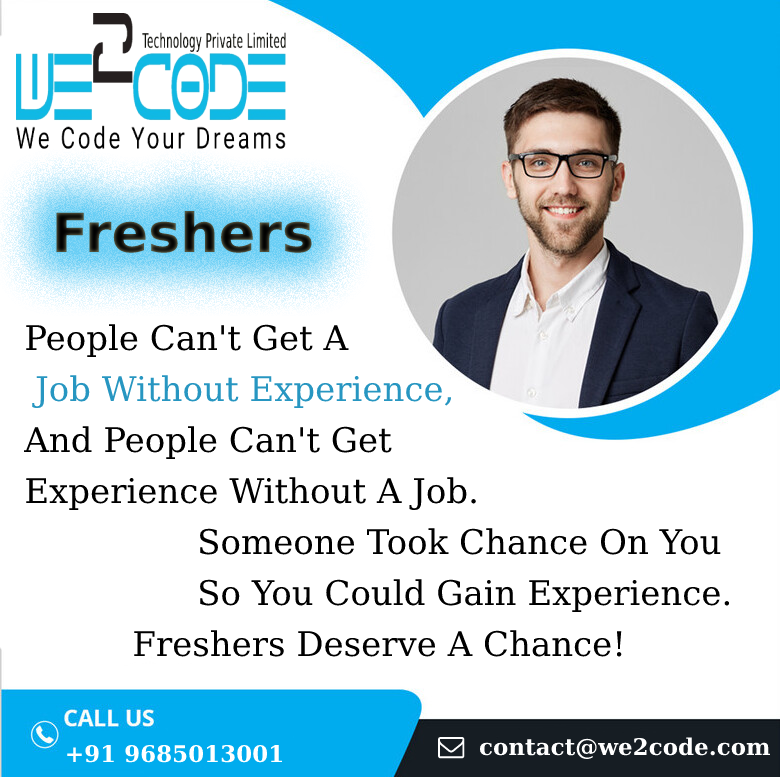
<style>
.page{position:relative;width:780px;height:777px;background:#ffffff}
.page>*{position:absolute;margin:0}
.t1{font:54px "DejaVuSans-Bold"}
.t2{font:34px/51px "DejaVuSerif";color:#000000}
.t3{font:34px/51px "DejaVuSerif";color:#2796c1}
.t4{font:23px "DejaVuSerif-Bold";color:#ffffff}
</style>
<div class="page">
<p class="t1" style="left:56px;top:210px;width:256px;height:43px">Freshers</p>
<p class="t2" style="left:24px;top:324px;width:706px;height:333px">People Can't Get A<br><span class="t3"> Job Without Experience, <br></span>And People Can't Get<br>Experience Without A Job.<br>                Someone Took Chance On You <br>                So You Could Gain Experience.<br>          Freshers Deserve A Chance!</p>
<p class="t4" style="left:479px;top:737px;width:291px;height:22px">contact@we2code.com</p>
<p class="t4" style="left:67px;top:744px;width:215px;height:19px">+91 9685013001</p>
</div>
